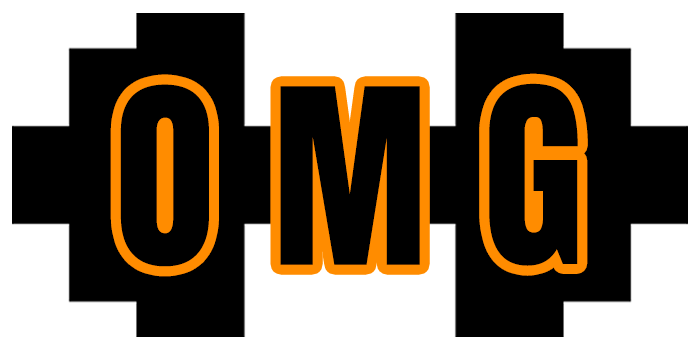
<style>
.page{position:relative;width:700px;height:350px;background:#000000}
.page>*{position:absolute;margin:0}
.t1{font:207.5px "Anton-Regular";color:#000000}
</style>
<div class="page">
<p class="t1" style="left:120px;top:84px;width:89px;height:183px">O</p>
<p class="t1" style="left:280px;top:86px;width:140px;height:179px">M</p>
<p class="t1" style="left:489px;top:83px;width:89px;height:183px">G</p>
</div>
